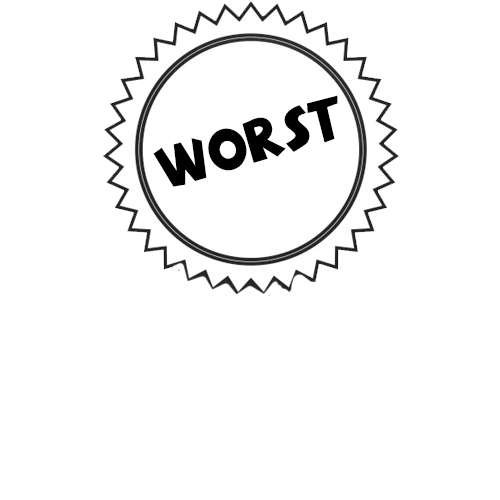
<style>
.page{position:relative;width:500px;height:500px;background:#ffffff}
.page>*{position:absolute;margin:0}
.t1{font:54.5px "THEMINION";color:#000000}
</style>
<div class="page">
<p class="t1" style="left:153px;top:95px;width:185px;height:92px;rotate:-17deg">WORST</p>
</div>
